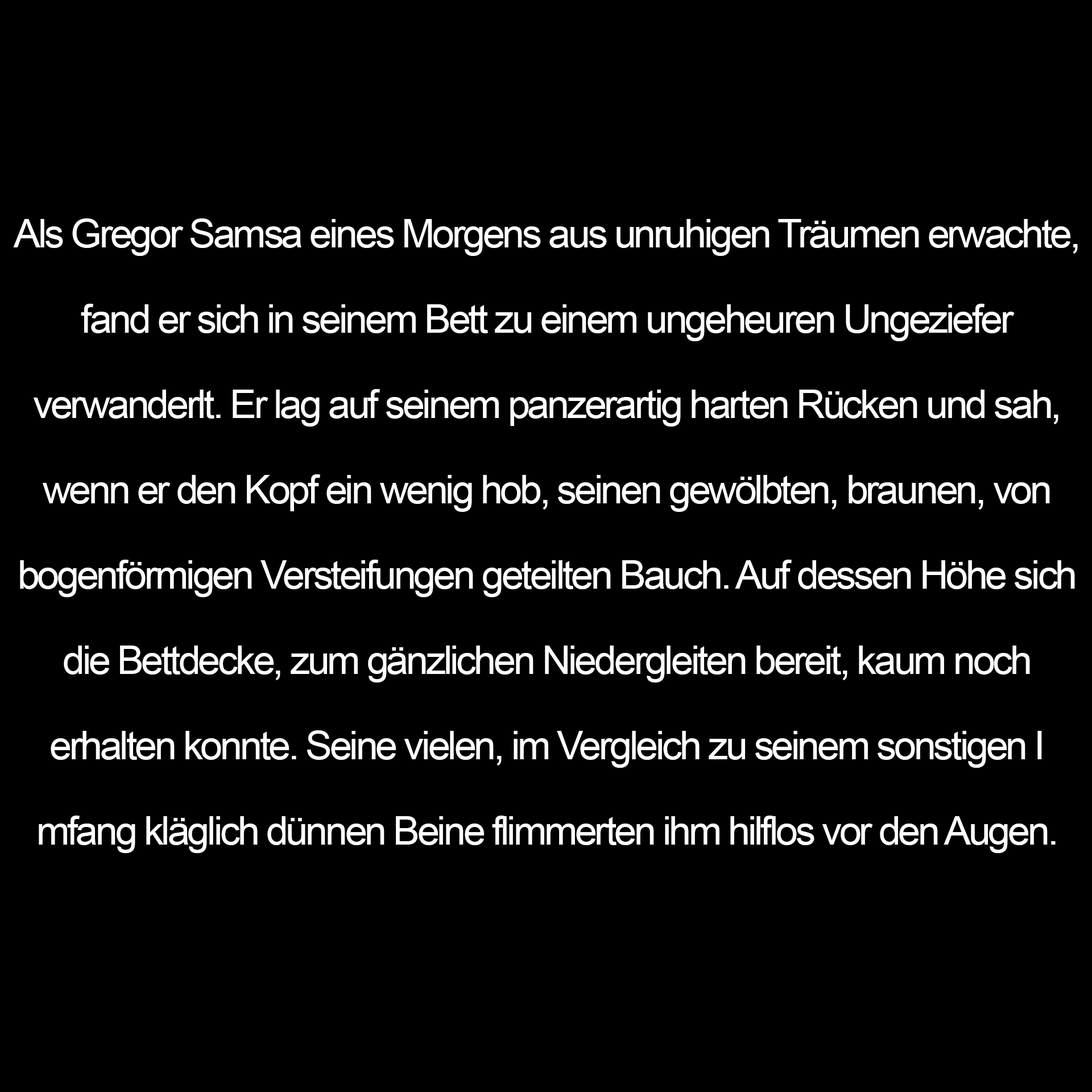
<style>
.page{position:relative;width:1092px;height:1092px;background:#000000}
.page>*{position:absolute;margin:0}
.t1{font:39.8px/85.3px "ArialMT";letter-spacing:-0.06em;color:#ffffff}
</style>
<div class="page">
<p class="t1" style="left:14px;top:218px;width:1064px;height:635px;text-align:center">Als Gregor Samsa eines Morgens aus unruhigen Träumen erwachte, <br>fand er sich in seinem Bett zu einem ungeheuren Ungeziefer <br>verwanderlt. Er lag auf seinem panzerartig harten Rücken und sah, <br>wenn er den Kopf ein wenig hob, seinen gewölbten, braunen, von <br>bogenförmigen Versteifungen geteilten Bauch. Auf dessen Höhe sich <br>die Bettdecke, zum gänzlichen Niedergleiten bereit, kaum noch <br>erhalten konnte. Seine vielen, im Vergleich zu seinem sonstigen I <br>mfang kläglich dünnen Beine flimmerten ihm hilflos vor den Augen.</p>
</div>
